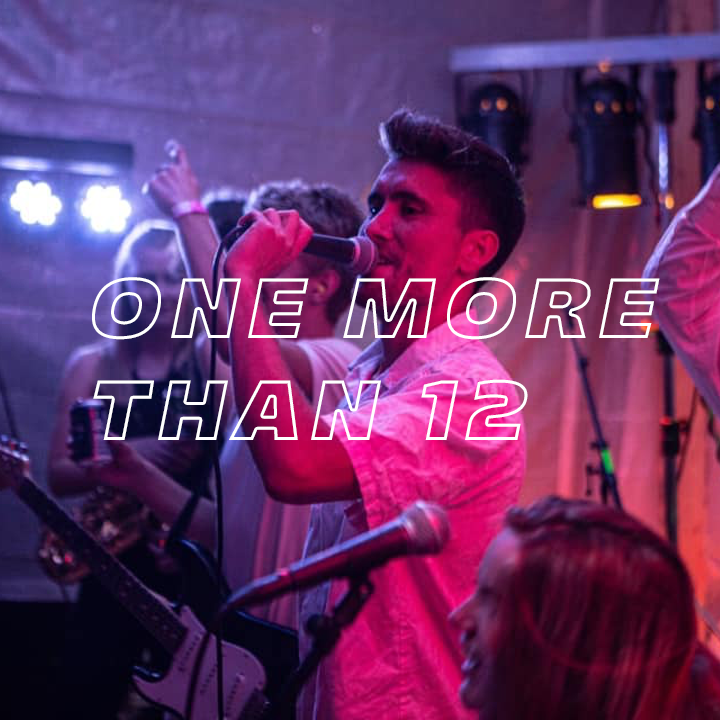
<style>
.page{position:relative;width:720px;height:720px}
.page>*{position:absolute;margin:0}
.t1{font:85px "Majoris-Italic";letter-spacing:0.1em;text-transform:uppercase}
</style>
<div class="page">
<p class="t1" style="left:92px;top:277px;width:568px;height:163px;text-align:right">one more<br>than 12</p>
</div>
